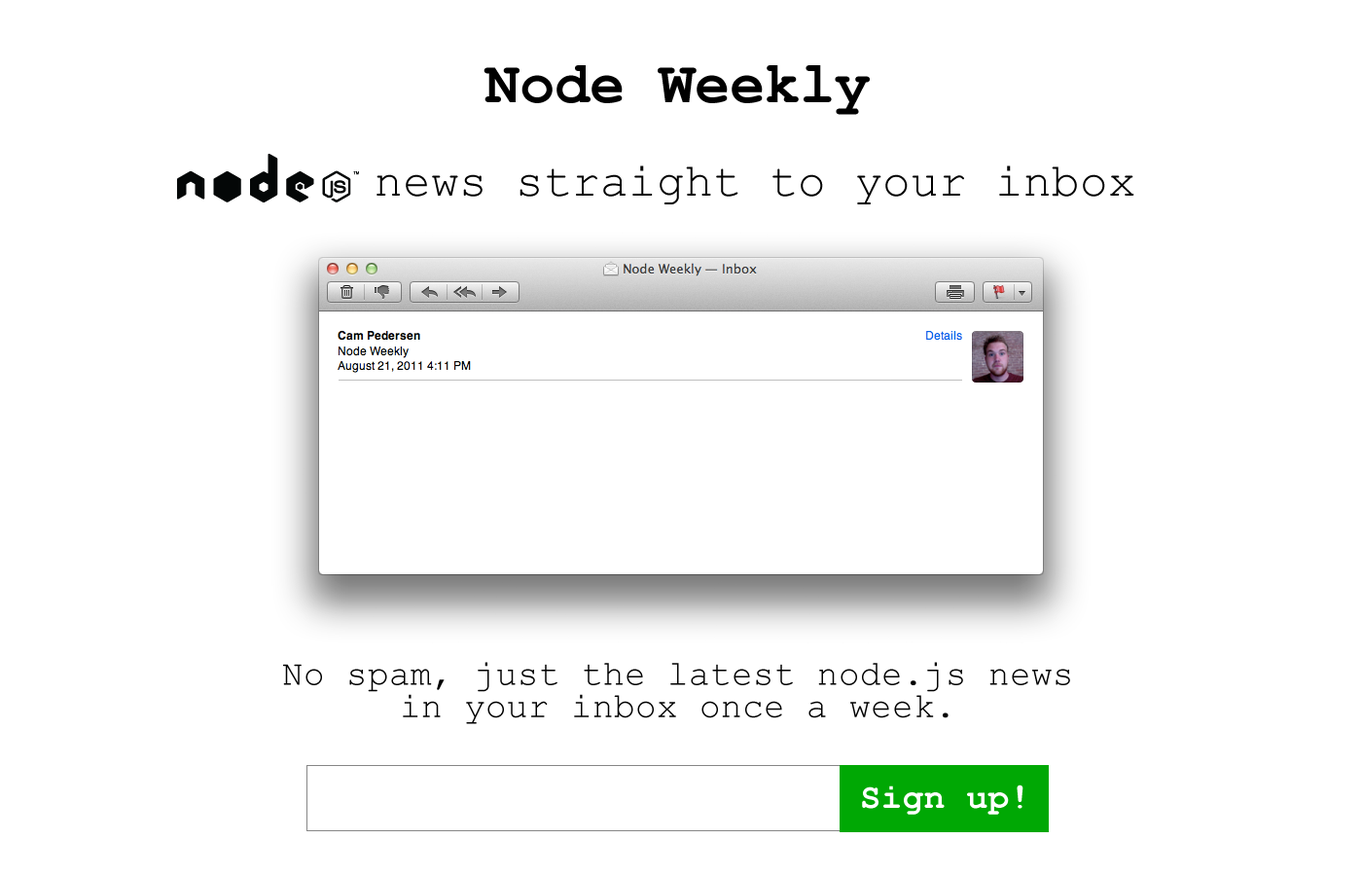
<style>
.page{position:relative;width:1362px;height:876px;background:#ffffff}
.page>*{position:absolute;margin:0}
.t1{font:58.4px "CourierNewPS-BoldMT";color:#000000}
.t2{font:46.7px "CourierNewPSMT";color:#000000}
.t3{font:35px/32.3px "CourierNewPSMT";color:#000000}
.t4{font:35px "CourierNewPS-BoldMT";color:#ffffff}
</style>
<div class="page">
<p class="t1" style="left:483px;top:65px;width:387px;height:50px">Node Weekly</p>
<p class="t2" style="left:376px;top:165px;width:758px;height:39px">news straight to your inbox</p>
<p class="t3" style="left:283px;top:662px;width:787px;height:62px;text-align:center">No spam, just the latest node.js news<br>in your inbox once a week.</p>
<p class="t4" style="left:862px;top:784px;width:161px;height:30px">Sign up!</p>
</div>
